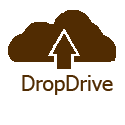
<style>
.page{position:relative;width:125px;height:125px;background:#ffffff}
.page>*{position:absolute;margin:0}
.t1{font:20.8px "Tahoma";color:#512c02}
</style>
<div class="page">
<p class="t1" style="left:22px;top:75px;width:91px;height:20px">DropDrive</p>
</div>
